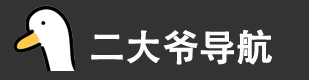
<style>
.page{position:relative;width:309px;height:80px;background:#333333}
.page>*{position:absolute;margin:0}
.t1{font:36px "AdobeHeitiStd-Regular";color:#fbfdfd;font-weight:bold}
</style>
<div class="page">
<p class="t1" style="left:91px;top:29px;width:181px;height:36px">二大爷导航</p>
</div>
